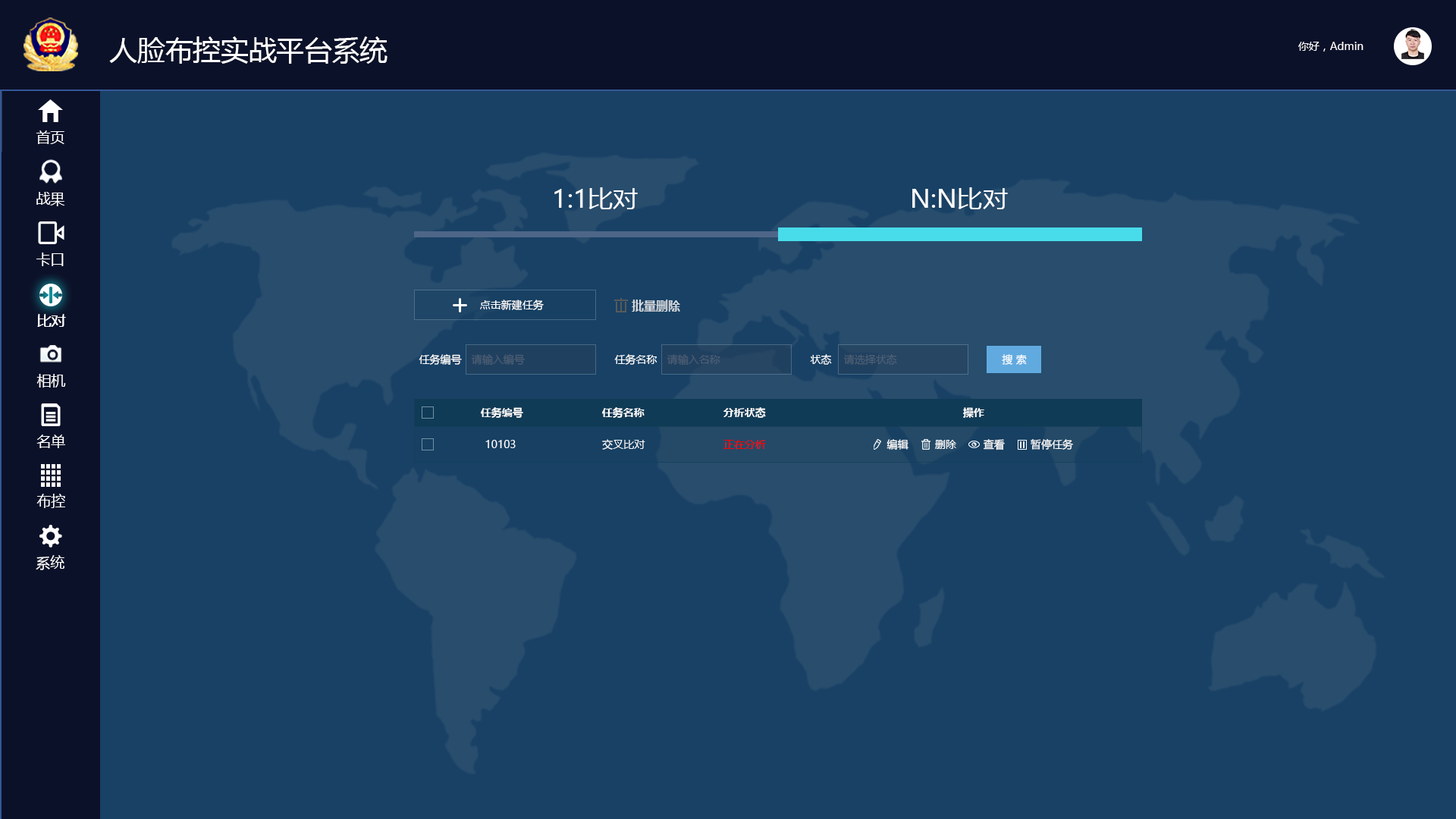
<style>
.page{position:relative;width:1456px;height:819px;background:#184165}
.page>*{position:absolute;margin:0}
.t1{font:10.6px "MicrosoftYaHei";color:#ffffff}
.t2{font:25.3px "MicrosoftYaHei";color:#ffffff}
.t3{font:12.1px "MicrosoftYaHei-Bold";color:#d4d9dd}
.t4{font:14.2px "MicrosoftYaHei";color:#ffffff}
.t5{font:10.6px "MicrosoftYaHei";color:#4b5e73}
.t6{font:10.6px "MicrosoftYaHei-Bold";color:#ffffff}
.t7{font:10.6px "MicrosoftYaHei";color:#ff0000}
</style>
<div class="page">
<p class="t1" style="left:1298px;top:42px;width:65px;height:10px">你好，Admin</p>
<p class="t2" style="left:554px;top:187px;width:84px;height:22px">1:1比对</p>
<p class="t2" style="left:912px;top:187px;width:96px;height:22px">N:N比对</p>
<p class="t1" style="left:480px;top:300px;width:64px;height:10px">点击新建任务</p>
<p class="t3" style="left:632px;top:300px;width:48px;height:12px">批量删除</p>
<p class="t4" style="left:38px;top:314px;width:28px;height:13px">比对</p>
<p class="t1" style="left:419px;top:354px;width:43px;height:11px">任务编号</p>
<p class="t5" style="left:471px;top:354px;width:54px;height:12px">请输入编号</p>
<p class="t1" style="left:614px;top:354px;width:43px;height:11px">任务名称</p>
<p class="t5" style="left:667px;top:354px;width:53px;height:12px">请输入名称</p>
<p class="t1" style="left:810px;top:354px;width:22px;height:11px">状态</p>
<p class="t5" style="left:843px;top:354px;width:54px;height:11px">请选择状态</p>
<p class="t1" style="left:1002px;top:354px;width:25px;height:11px">搜 索</p>
<p class="t6" style="left:481px;top:407px;width:42px;height:11px">任务编号</p>
<p class="t6" style="left:602px;top:407px;width:43px;height:11px">任务名称</p>
<p class="t6" style="left:723px;top:407px;width:43px;height:11px">分析状态</p>
<p class="t6" style="left:963px;top:407px;width:21px;height:11px">操作</p>
<p class="t1" style="left:485px;top:440px;width:31px;height:8px">10103</p>
<p class="t1" style="left:602px;top:439px;width:43px;height:11px">交叉比对</p>
<p class="t7" style="left:723px;top:440px;width:43px;height:9px">正在分析</p>
<p class="t1" style="left:886px;top:439px;width:22px;height:11px">编辑</p>
<p class="t1" style="left:935px;top:440px;width:21px;height:9px">删除</p>
<p class="t1" style="left:984px;top:439px;width:21px;height:11px">查看</p>
<p class="t1" style="left:1031px;top:439px;width:42px;height:11px">暂停任务</p>
</div>
